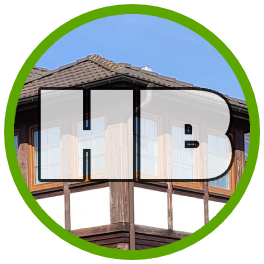
<style>
.page{position:relative;width:264px;height:264px;background:#ffffff}
.page>*{position:absolute;margin:0}
.t1{font:129px "EricaOne-Regular"}
</style>
<div class="page">
<p class="t1" style="left:40px;top:89px;width:192px;height:90px">HB</p>
</div>
